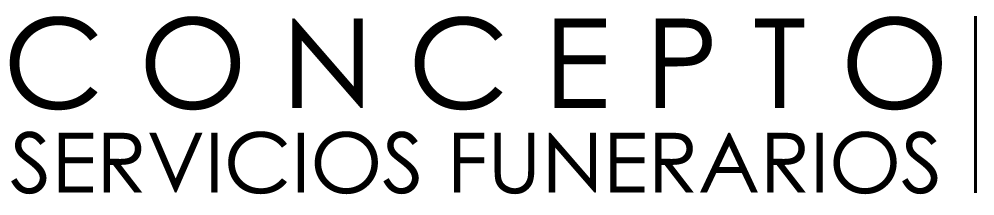
<style>
.page{position:relative;width:994px;height:215px;background:#ffffff}
.page>*{position:absolute;margin:0}
.t1{font:124.4px "CenturyGothic";color:#000000}
.t2{font:83.1px "CenturyGothic";color:#000000}
</style>
<div class="page">
<p class="t1" style="left:9px;top:16px;width:933px;height:95px">C O N C E P T O</p>
<p class="t2" style="left:11px;top:131px;width:927px;height:64px">SERVICIOS FUNERARIOS</p>
</div>
